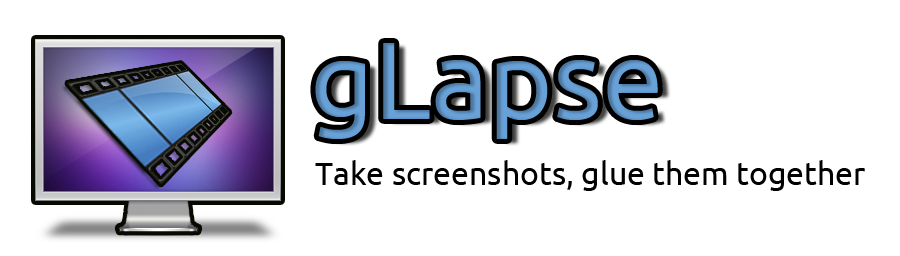
<style>
.page{position:relative;width:900px;height:256px;background:#ffffff}
.page>*{position:absolute;margin:0}
.t1{font:32px "Ubuntu";color:#000000}
</style>
<div class="page">
<p class="t1" style="left:315px;top:160px;width:550px;height:31px">Take screenshots, glue them together</p>
</div>
